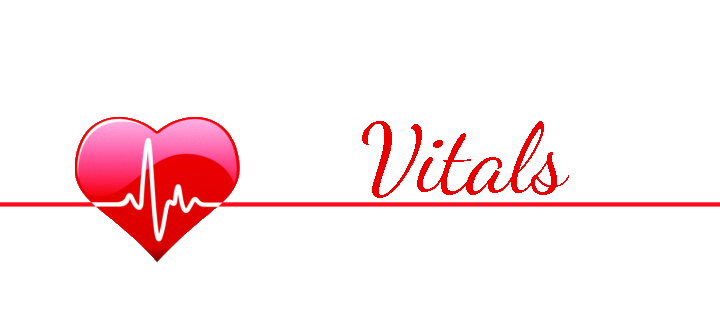
<style>
.page{position:relative;width:720px;height:320px;background:#ffffff}
.page>*{position:absolute;margin:0}
.t1{font:96px "DancingScript";color:#e90101}
</style>
<div class="page">
<p class="t1" style="left:362px;top:121px;width:207px;height:77px">Vitals</p>
</div>
